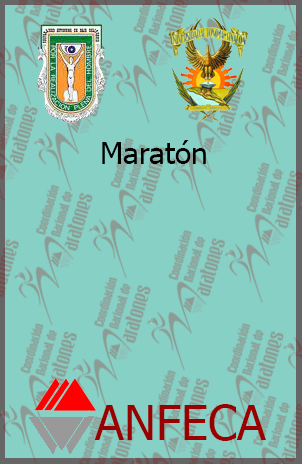
<style>
.page{position:relative;width:302px;height:464px;background:#87d0c5}
.page>*{position:absolute;margin:0}
.t1{font:30px "Tahoma";color:#000000}
.t2{font:48px "Tahoma";color:#990000}
</style>
<div class="page">
<p class="t1" style="left:102px;top:140px;width:104px;height:24px">Maratón</p>
<p class="t2" style="left:94px;top:404px;width:172px;height:37px">ANFECA</p>
</div>
